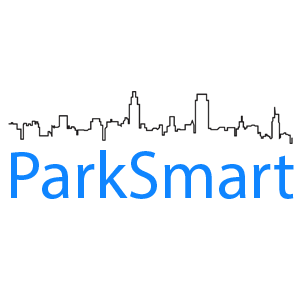
<style>
.page{position:relative;width:300px;height:300px;background:#ffffff}
.page>*{position:absolute;margin:0}
.t1{font:67.7px "MyriadPro-Regular";color:#0f85ff}
</style>
<div class="page">
<p class="t1" style="left:11px;top:150px;width:283px;height:49px">ParkSmart Urban</p>
</div>
